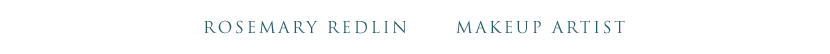
<style>
.page{position:relative;width:830px;height:54px;background:#ffffff}
.page>*{position:absolute;margin:0}
.t1{font:16px "TrajanPro-Regular";letter-spacing:0.155em;color:#285a68}
</style>
<div class="page">
<p class="t1" style="left:204px;top:20px;width:421px;height:14px">ROSEMARY REDLIN      MAKEUP ARTIST</p>
</div>
